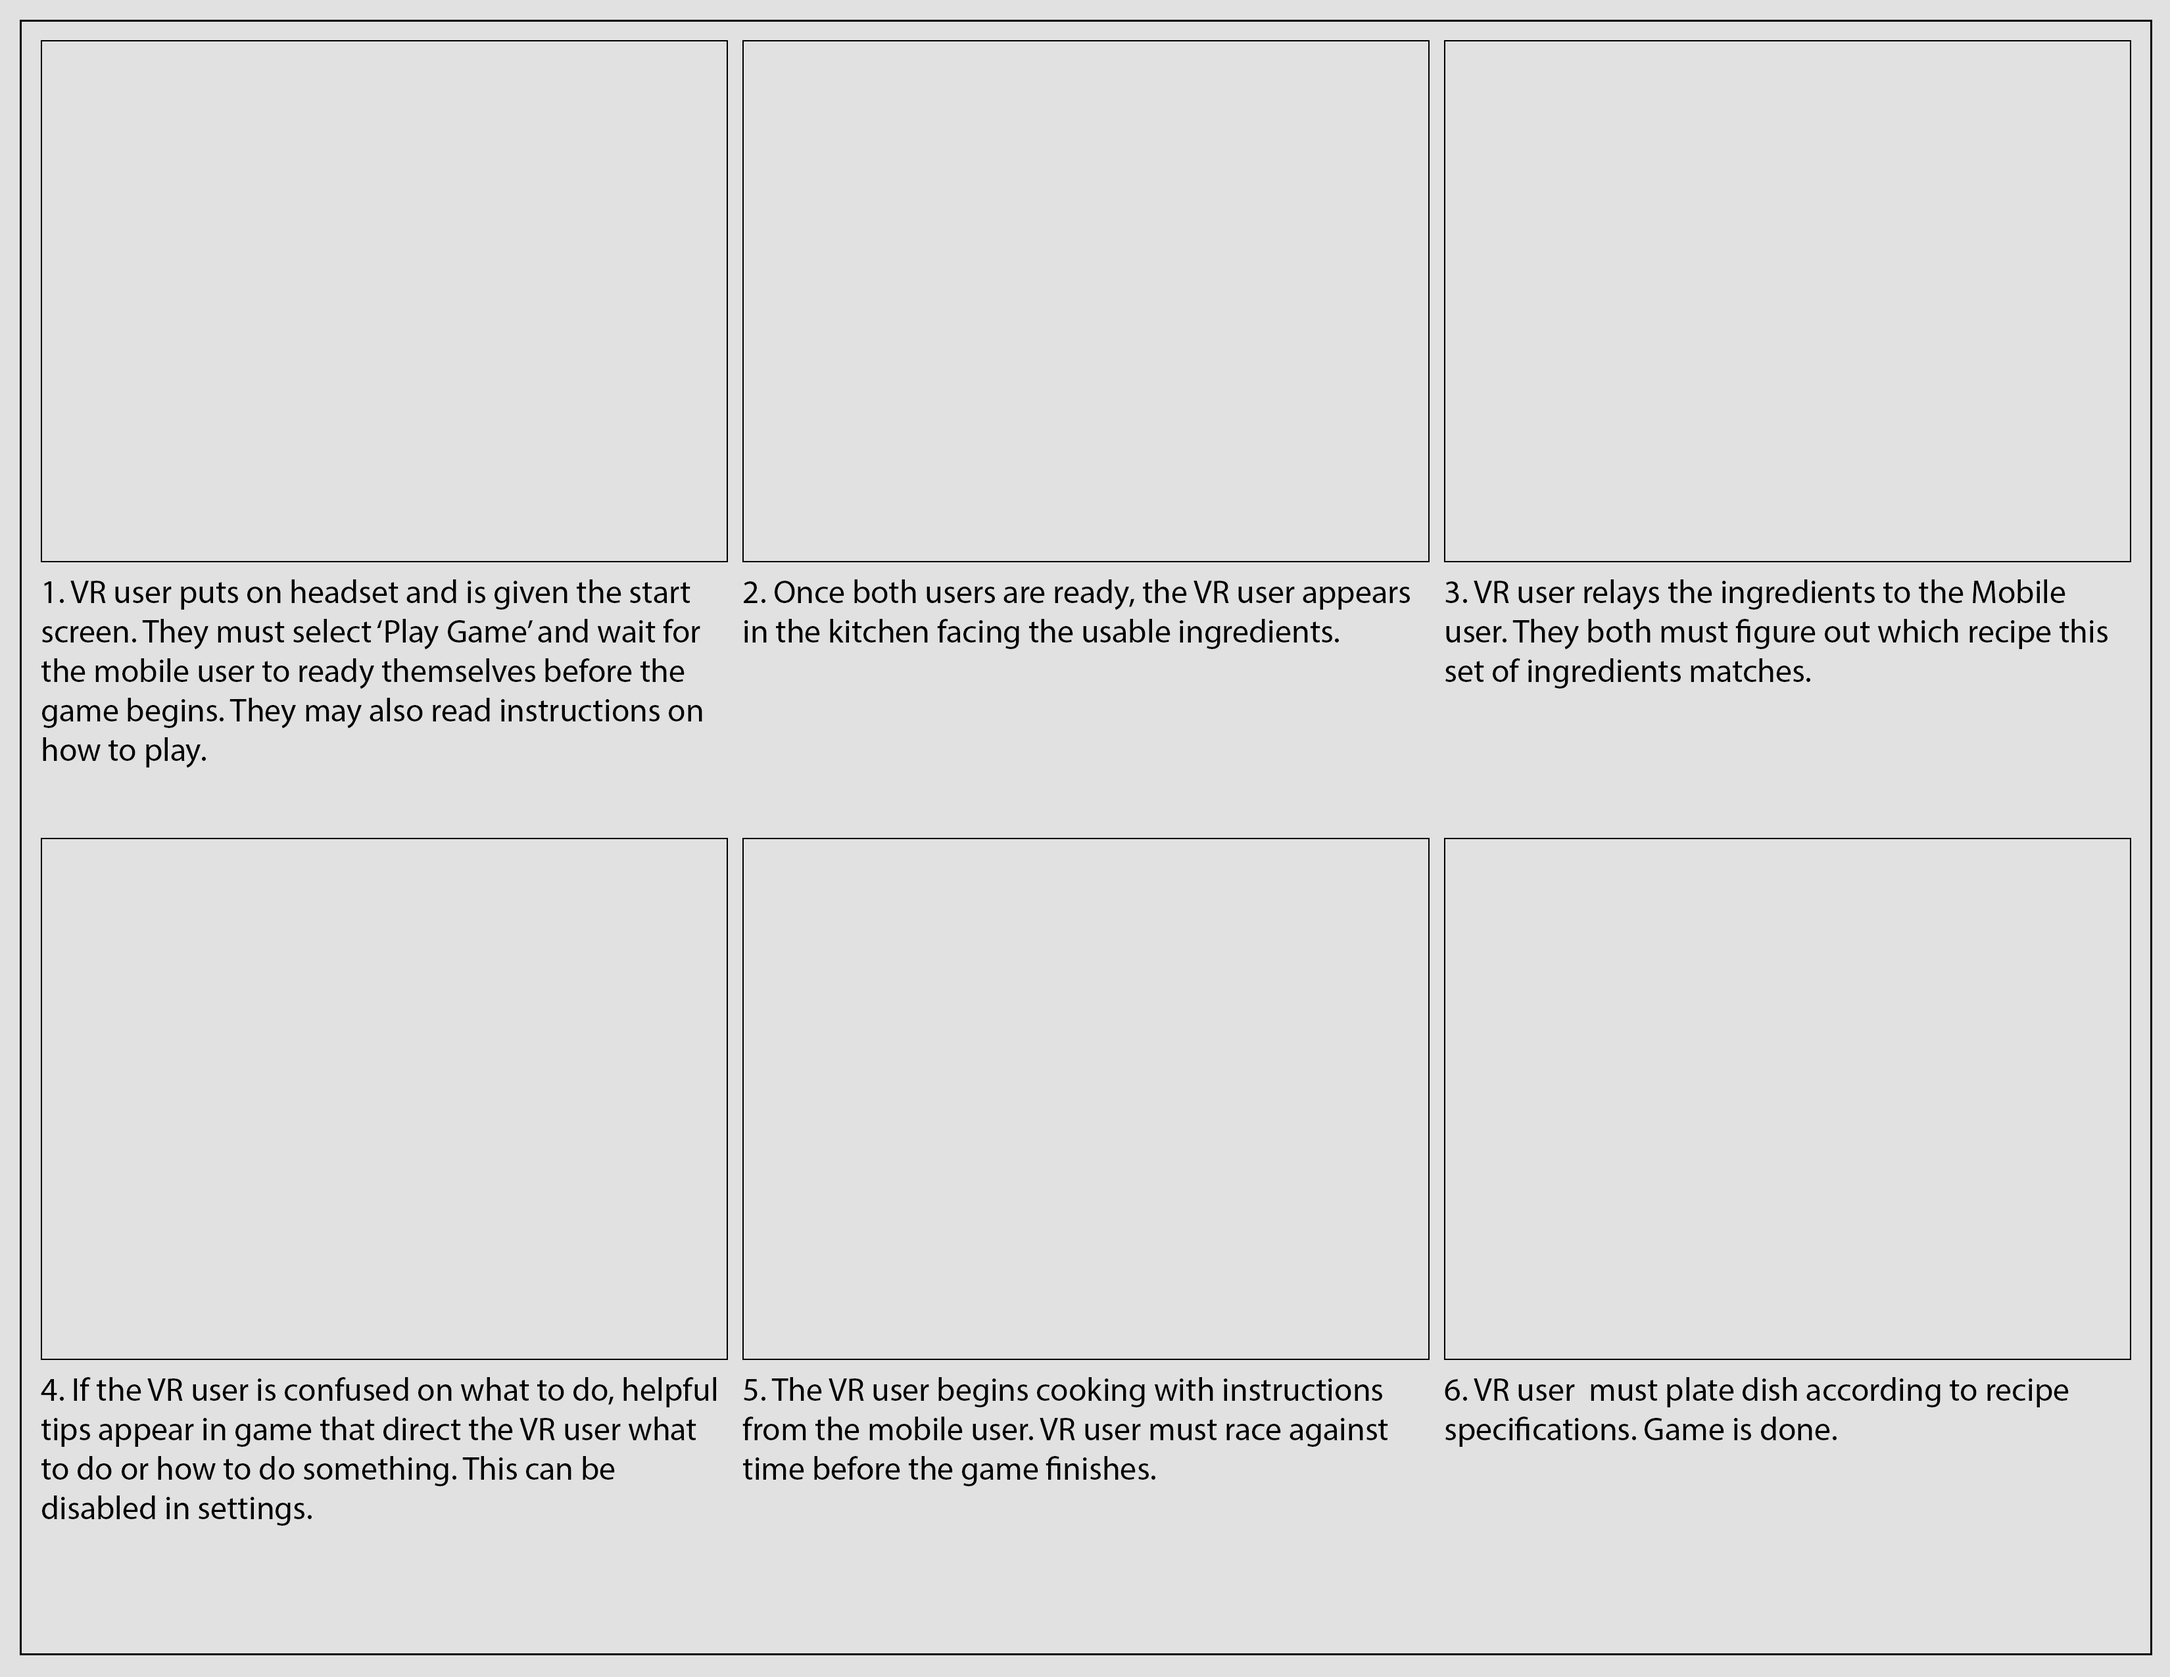
<style>
.page{position:relative;width:2170px;height:1677px;background:#e1e1e1}
.page>*{position:absolute;margin:0}
.t1{font:7.9px "MyriadPro-Regular";color:#000000}
</style>
<div class="page">
<p class="t1" style="left:41px;top:579px;width:661px;height:189px">1. VR user puts on headset and is given the start screen. They must select ‘Play Game’ and wait for the mobile user to ready themselves before the game begins. They may also read instructions on how to play.</p>
<p class="t1" style="left:744px;top:579px;width:666px;height:70px">2. Once both users are ready, the VR user appears in the kitchen facing the usable ingredients.</p>
<p class="t1" style="left:1445px;top:579px;width:662px;height:109px">3. VR user relays the ingredients to the Mobile user. They both must figure out which recipe this set of ingredients matches.</p>
<p class="t1" style="left:41px;top:1377px;width:675px;height:148px">4. If the VR user is confused on what to do, helpful tips appear in game that direct the VR user what to do or how to do something. This can be disabled in settings.</p>
<p class="t1" style="left:742px;top:1377px;width:646px;height:109px">5. The VR user begins cooking with instructions from the mobile user. VR user must race against time before the game finishes.</p>
<p class="t1" style="left:1445px;top:1377px;width:624px;height:70px">6. VR user  must plate dish according to recipe specifications. Game is done.</p>
</div>
